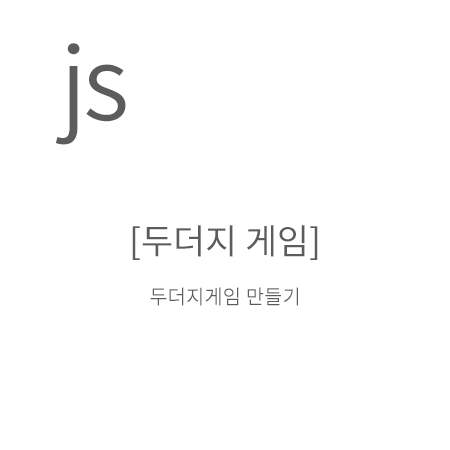
<style>
.page{position:relative;width:450px;height:450px;background:#ffffff}
.page>*{position:absolute;margin:0}
.t1{font:100px "NotoSansCJKkr-DemiLight";letter-spacing:-0.04em;color:#5c5c5c}
.t2{font:20px/50px "NotoSansCJKkr-DemiLight";color:#5c5c5c}
.t3{font:35px/50px "NotoSansCJKkr-Regular";color:#5c5c5c}
</style>
<div class="page">
<p class="t1" style="left:56px;top:43px;width:70px;height:102px">js</p>
<p class="t2" style="left:132px;top:225px;width:186px;height:81px;text-align:center"><span class="t3">[두더지 게임]<br></span>두더지게임 만들기</p>
</div>
